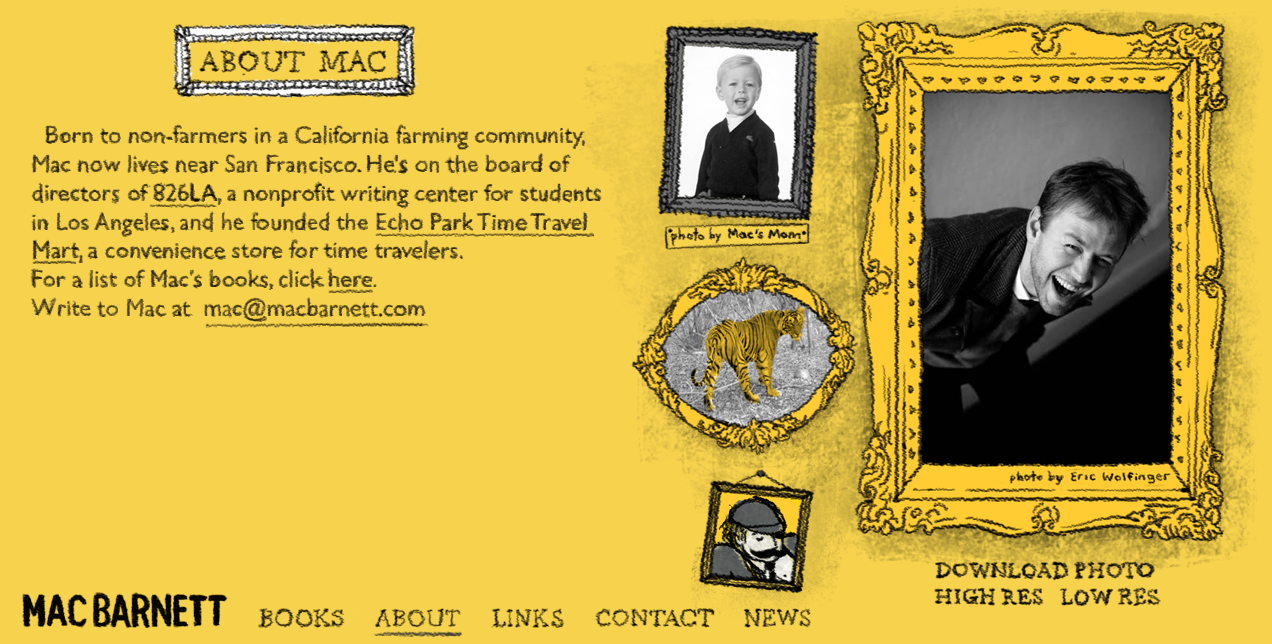
<style>
.page{position:relative;width:1272px;height:644px;background:#f6d24d}
.page>*{position:absolute;margin:0}
.t1{font:24px "GillSans"}
</style>
<div class="page">
<p class="t1" style="left:31px;top:126px;width:571px;height:195px">Born to non-farmers in a California farming community, <br>Mac now lives near San Francisco. He's on the board of <br>directors of 826LA, a nonprofit writing center for students <br>in Los Angeles, and he founded the Echo Park Time Travel <br>Mart, a convenience store for time travelers. <br>For a list of Mac's books, click here.<br>Write to Mac at  mac@macbarnett.com</p>
</div>
